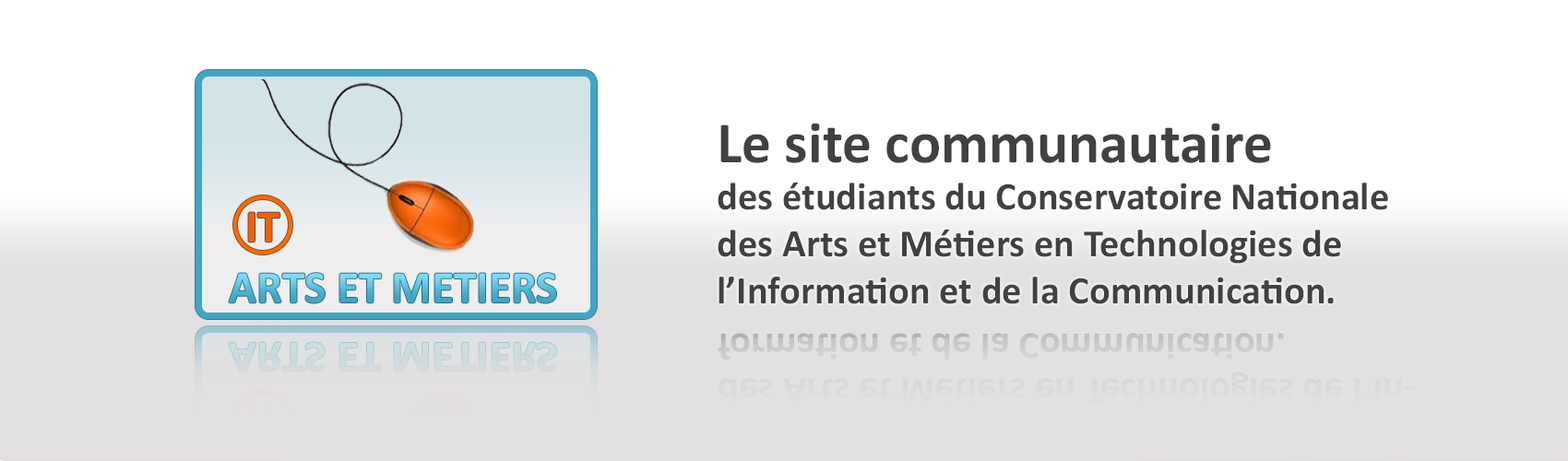
<style>
.page{position:relative;width:1568px;height:461px;background:#ffffff}
.page>*{position:absolute;margin:0}
.t1{font:39.2px "Calibri-Bold";color:#414141}
.t2{font:58.7px "Calibri-Bold";color:#414141}
.t3{font:45.7px "Calibri-Bold";color:#f3620a}
.t4{font:45.7px "Calibri-Bold"}
.t5{font:44.1px "Calibri-Bold";color:#ccdbdf;scale:1.04 1}
</style>
<div class="page">
<p class="t1" style="left:718px;top:123px;width:670px;height:181px"><span class="t2">Le site communautaire<br></span>des étudiants du Conservatoire Nationale des Arts et Métiers en Technologies de <br>l’Information et de la Communication.</p>
<p class="t3" style="left:248px;top:212px;width:32px;height:31px">IT</p>
<p class="t4" style="left:229px;top:273px;width:327px;height:30px">ARTS ET METIERS</p>
<p class="t5" style="left:229px;top:342px;width:327px;height:30px">ARTS ET METIERS</p>
</div>
